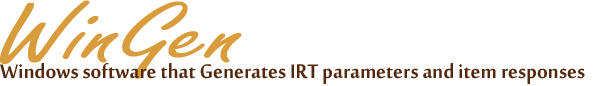
<style>
.page{position:relative;width:599px;height:86px;background:#ffffff}
.page>*{position:absolute;margin:0}
.t1{font:88px "FreestyleScript-Regular";color:#d99c3c;scale:1.5 1}
.t2{font:30px "MoolBoran";color:#53290d}
</style>
<div class="page">
<p class="t1" style="left:0px;top:0px;width:242px;height:79px">WinGen</p>
<p class="t2" style="left:0px;top:62px;width:585px;height:22px">Windows software that Generates IRT parameters and item responses</p>
</div>
